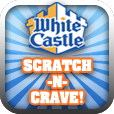
<style>
.page{position:relative;width:114px;height:114px}
.page>*{position:absolute;margin:0}
.t1{font:13.4px "AachenStd-Bold";color:#ffffff}
</style>
<div class="page">
<p class="t1" style="left:23px;top:59px;width:69px;height:45px;text-align:center">SCRATCH<br>-N-<br>CRAVE!</p>
</div>
